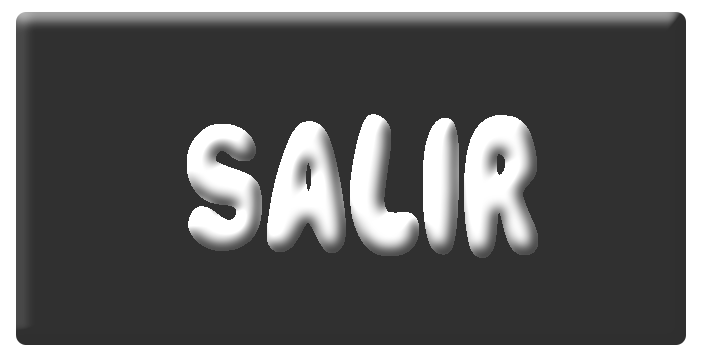
<style>
.page{position:relative;width:703px;height:360px;background:#303030}
.page>*{position:absolute;margin:0}
.t1{font:156.2px "Dragon-Ball-Regular";font-weight:bold;scale:0.72 1}
</style>
<div class="page">
<p class="t1" style="left:187px;top:114px;width:351px;height:144px">salir</p>
</div>
